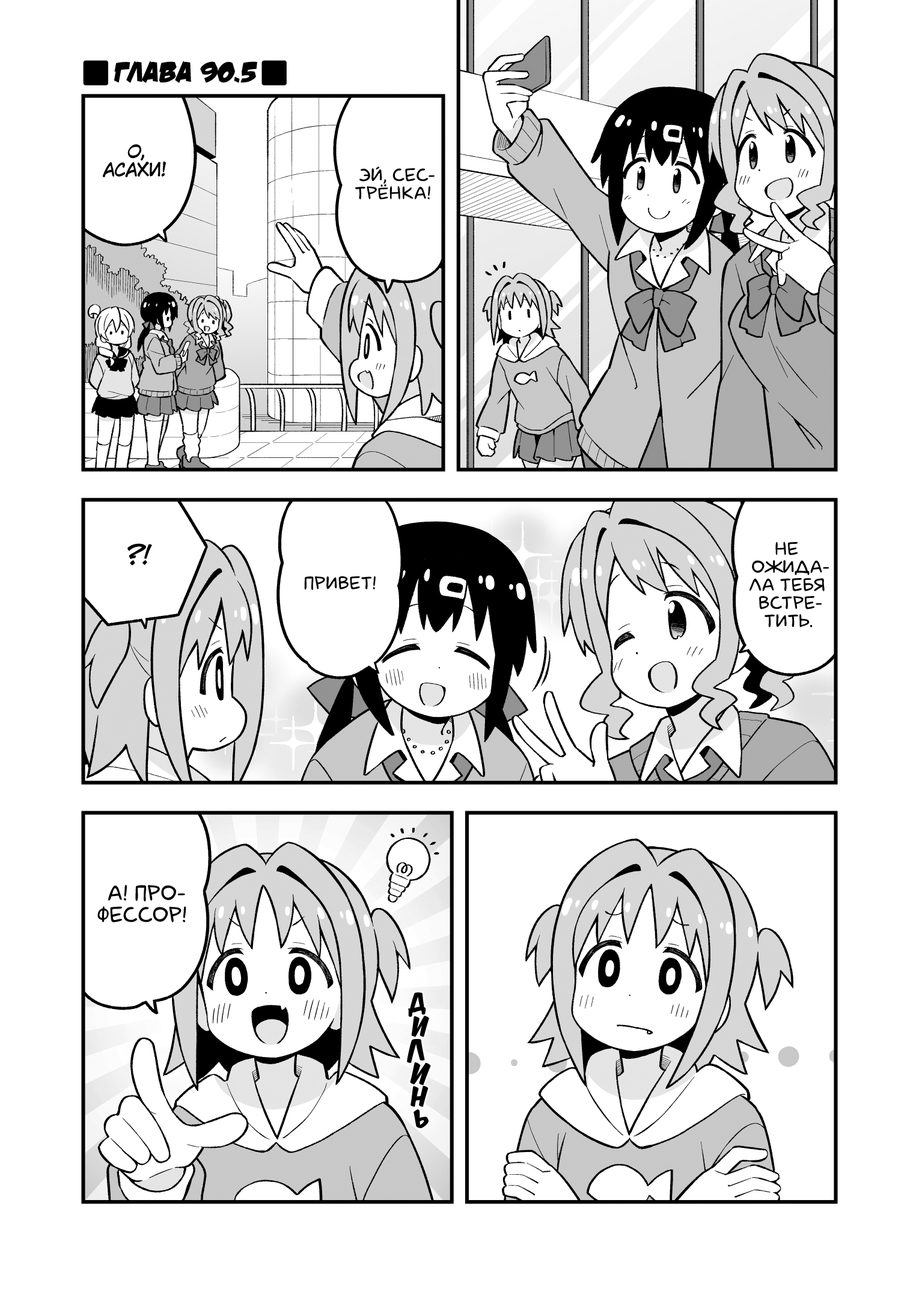
<style>
.page{position:relative;width:919px;height:1298px;background:#ffffff}
.page>*{position:absolute;margin:0}
.t1{font:28.8px "v_DamnNoisyKids";color:#000000;text-transform:uppercase}
.t2{font:18px "KuraiVoice2";color:#000000;text-transform:uppercase}
.t3{font:18px "laCartoonerie";color:#000000;text-transform:uppercase}
.t4{font:25.2px "v_CCJeffCampbell";color:#000000;text-transform:uppercase}
.t5{font:21.6px "laCartoonerie";color:#000000;text-transform:uppercase}
.t6{font:21.6px "KomikaTitle-AxisRUS-LAT";color:#000000;text-transform:uppercase}
.t7{font:23.4px "KomikaTitle-AxisRUS-LAT";color:#000000;text-transform:uppercase}
.t8{font:25.2px "KomikaTitle-AxisRUS-LAT";color:#000000;text-transform:uppercase}
</style>
<div class="page">
<p class="t1" style="left:114px;top:61px;width:143px;height:22px">Глава 90.5</p>
<p class="t2" style="left:103px;top:144px;width:63px;height:33px;text-align:center">О,<br>Асахи!</p>
<p class="t3" style="left:355px;top:166px;width:79px;height:33px;text-align:center">Эй, сес-<br>трёнка!</p>
<p class="t4" style="left:127px;top:543px;width:25px;height:22px">?!</p>
<p class="t3" style="left:749px;top:541px;width:80px;height:86px;text-align:center">Не<br>ожида-<br>ла тебя<br>встре-<br>тить.</p>
<p class="t3" style="left:304px;top:576px;width:72px;height:14px">Привет!</p>
<p class="t5" style="left:97px;top:884px;width:89px;height:38px;text-align:center">А! Про-<br>фессор!</p>
<p class="t6" style="left:408px;top:992px;width:18px;height:25px;rotate:-9deg">д</p>
<p class="t7" style="left:411px;top:1015px;width:18px;height:22px">и</p>
<p class="t8" style="left:407px;top:1039px;width:18px;height:24px;rotate:-12deg">л</p>
<p class="t8" style="left:410px;top:1062px;width:21px;height:23px;rotate:5deg">и</p>
<p class="t7" style="left:410px;top:1086px;width:18px;height:21px">н</p>
<p class="t6" style="left:413px;top:1109px;width:15px;height:19px;rotate:-16deg">ь</p>
</div>
